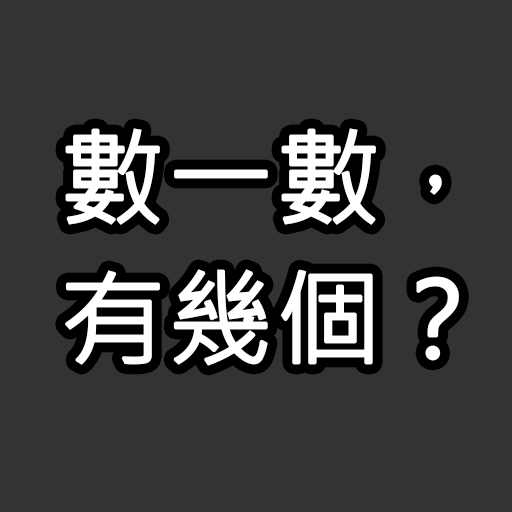
<style>
.page{position:relative;width:512px;height:512px;background:#333333}
.page>*{position:absolute;margin:0}
.t1{font:104.9px "MicrosoftJhengHeiRegular";color:#ffffff;font-weight:bold}
</style>
<div class="page">
<p class="t1" style="left:65px;top:128px;width:377px;height:97px">數一數，</p>
<p class="t1" style="left:65px;top:269px;width:394px;height:97px">有幾個？</p>
</div>
